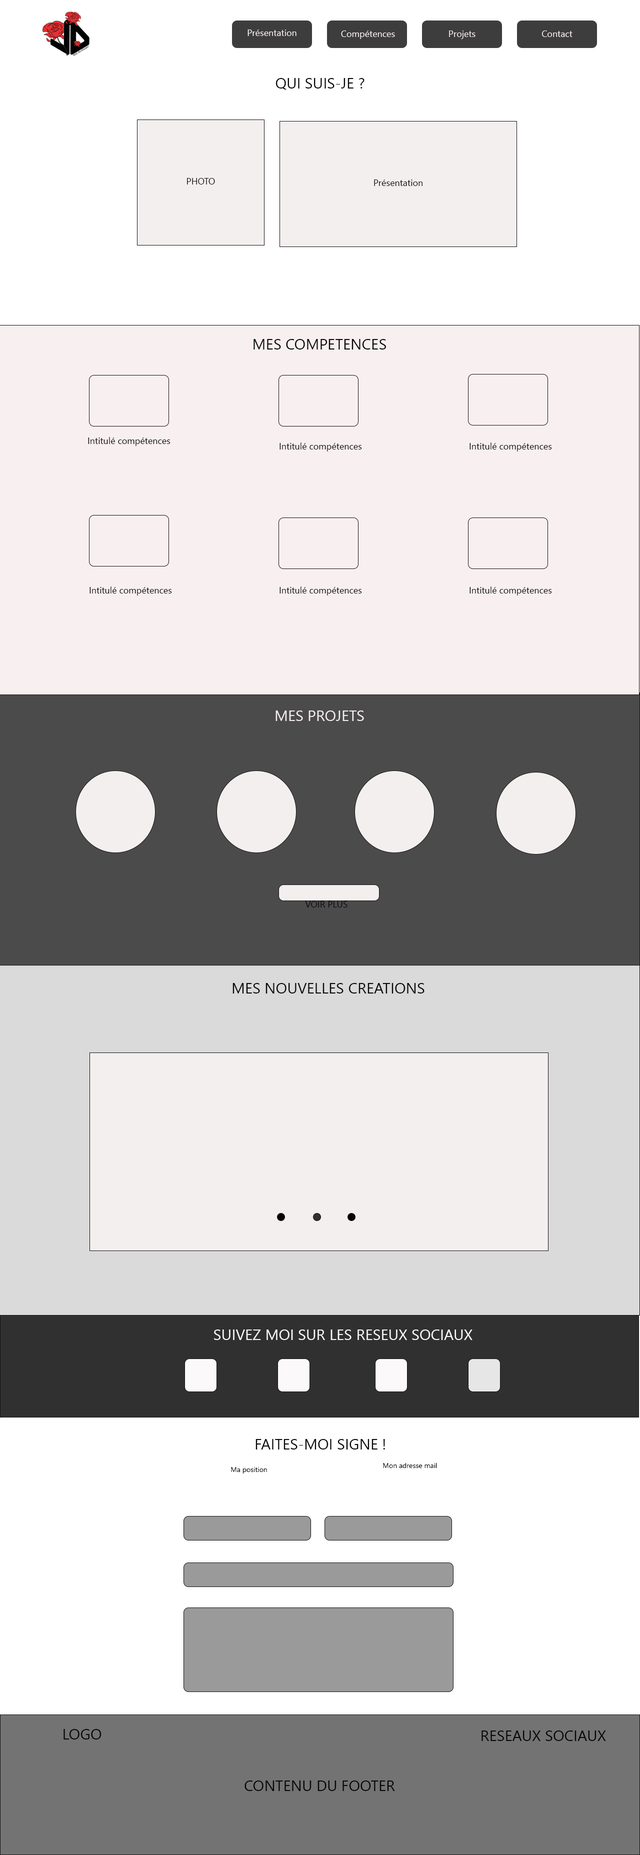
<style>
.page{position:relative;width:640px;height:1855px;background:#ffffff}
.page>*{position:absolute;margin:0}
.t1{font:9px "SegoeUI";color:#fcf1f1}
.t2{font:15px "SegoeUI";color:#070707}
.t3{font:9px "SegoeUI";color:#070707}
.t4{font:15px "SegoeUI";color:#f8eeee}
.t5{font:9px "SegoeUI";color:#090909}
.t6{font:15px "SegoeUI";color:#090909}
.t7{font:15px "SegoeUI";color:#fbf9f9}
.t8{font:7px "SegoeUI";color:#070707}
</style>
<div class="page">
<p class="t1" style="left:248px;top:30px;width:48px;height:6px">Présentation</p>
<p class="t1" style="left:341px;top:30px;width:54px;height:9px">Compétences</p>
<p class="t1" style="left:449px;top:30px;width:27px;height:9px">Projets</p>
<p class="t1" style="left:542px;top:30px;width:30px;height:7px">Contact</p>
<p class="t2" style="left:276px;top:78px;width:88px;height:12px">QUI SUIS-JE ?</p>
<p class="t3" style="left:187px;top:178px;width:28px;height:6px">PHOTO</p>
<p class="t3" style="left:374px;top:180px;width:48px;height:6px">Présentation</p>
<p class="t2" style="left:254px;top:339px;width:132px;height:11px">MES COMPETENCES</p>
<p class="t3" style="left:88px;top:437px;width:82px;height:9px">Intitulé compétences</p>
<p class="t3" style="left:280px;top:442px;width:82px;height:10px">Intitulé compétences</p>
<p class="t3" style="left:470px;top:442px;width:82px;height:10px">Intitulé compétences</p>
<p class="t3" style="left:90px;top:586px;width:82px;height:10px">Intitulé compétences</p>
<p class="t3" style="left:280px;top:586px;width:82px;height:10px">Intitulé compétences</p>
<p class="t3" style="left:470px;top:586px;width:82px;height:10px">Intitulé compétences</p>
<p class="t4" style="left:276px;top:710px;width:88px;height:11px">MES PROJETS</p>
<p class="t5" style="left:305px;top:901px;width:43px;height:7px">VOIR PLUS</p>
<p class="t6" style="left:232px;top:983px;width:192px;height:11px">MES NOUVELLES CREATIONS</p>
<p class="t7" style="left:214px;top:1330px;width:258px;height:10px">SUIVEZ MOI SUR LES RESEUX SOCIAUX</p>
<p class="t2" style="left:256px;top:1439px;width:129px;height:11px">FAITES-MOI SIGNE !</p>
<p class="t8" style="left:231px;top:1467px;width:36px;height:7px">Ma position</p>
<p class="t8" style="left:383px;top:1463px;width:54px;height:5px">Mon adresse mail</p>
<p class="t2" style="left:64px;top:1729px;width:38px;height:11px">LOGO</p>
<p class="t2" style="left:482px;top:1730px;width:124px;height:11px">RESEAUX SOCIAUX</p>
<p class="t2" style="left:244px;top:1780px;width:151px;height:11px">CONTENU DU FOOTER</p>
</div>
